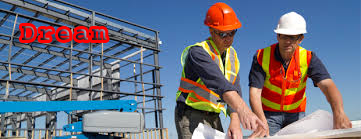
<style>
.page{position:relative;width:361px;height:139px}
.page>*{position:absolute;margin:0}
.t1{font:24px "Courier-Bold";letter-spacing:0.14em}
</style>
<div class="page">
<p class="t1" style="left:22px;top:26px;width:85px;height:14px">Dream</p>
</div>
